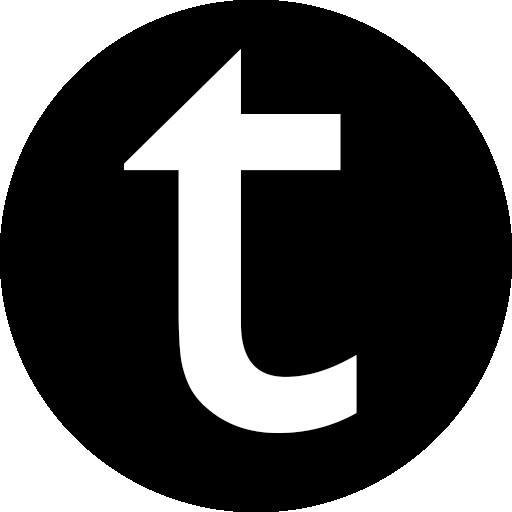
<style>
.page{position:relative;width:512px;height:512px;background:#000000}
.page>*{position:absolute;margin:0}
.t1{font:700px "GillSansMT";color:#ffffff}
</style>
<div class="page">
<p class="t1" style="left:124px;top:49px;width:233px;height:384px">t</p>
</div>
